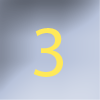
<style>
.page{position:relative;width:100px;height:100px}
.page>*{position:absolute;margin:0}
.t1{font:72px "MyriadPro-Regular";color:#ffe958}
</style>
<div class="page">
<p class="t1" style="left:33px;top:28px;width:30px;height:49px">3</p>
</div>
